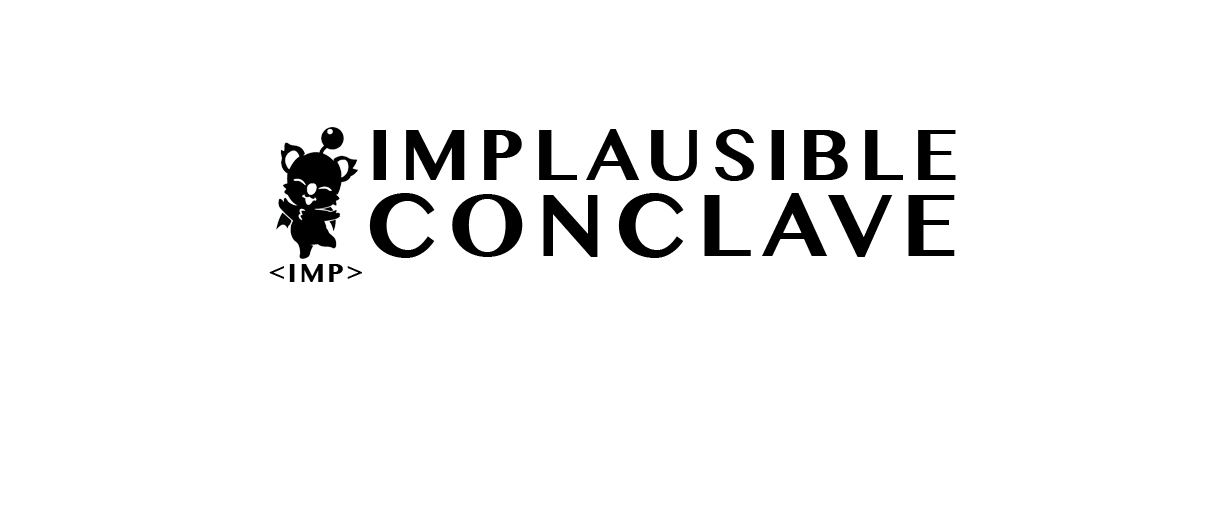
<style>
.page{position:relative;width:1229px;height:514px;background:#ffffff}
.page>*{position:absolute;margin:0}
.t1{font:72px "LaoMN-Bold";letter-spacing:0.1em;color:#000000}
.t2{font:88.3px "LaoMN-Bold";letter-spacing:0.1em;color:#000000}
.t3{font:25.6px "LaoMN-Bold";letter-spacing:0.1em;color:#000000}
</style>
<div class="page">
<p class="t1" style="left:373px;top:129px;width:583px;height:52px">IMPLAUSIBLE</p>
<p class="t2" style="left:369px;top:193px;width:586px;height:65px">CONCLAVE</p>
<p class="t3" style="left:269px;top:264px;width:93px;height:18px">&lt;IMP&gt;</p>
</div>
